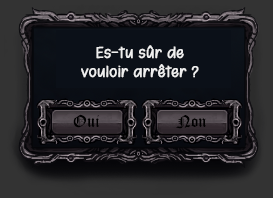
<style>
.page{position:relative;width:273px;height:198px}
.page>*{position:absolute;margin:0}
.t1{font:16px "212BabyGirl";color:#ffffff;font-weight:bold}
</style>
<div class="page">
<p class="t1" style="left:81px;top:45px;width:118px;height:33px;text-align:center;opacity:0.9">Es-tu sûr de<br>vouloir arrêter ?</p>
</div>
